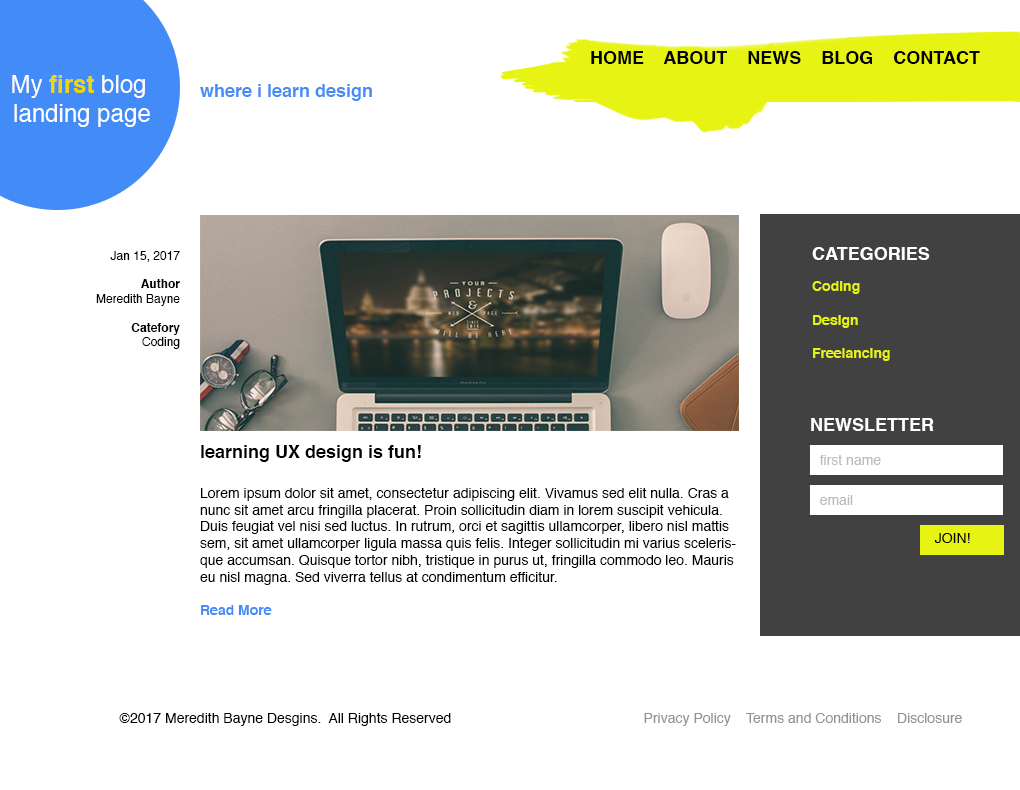
<style>
.page{position:relative;width:1020px;height:790px;background:#ffffff}
.page>*{position:absolute;margin:0}
.t1{font:18px "Helvetica-Bold";color:#000000}
.t2{font:24px "Helvetica";color:#ffffff}
.t3{font:24px "Helvetica-Bold";color:#f0d700}
.t4{font:18px "Helvetica-Bold";color:#438bf7}
.t5{font:12px "Helvetica";color:#000000}
.t6{font:12px "Helvetica-Bold";color:#000000}
.t7{font:14px "Helvetica-Bold";color:#e7f413}
.t8{font:18px "Helvetica-Bold";color:#ffffff}
.t9{font:14px "Helvetica";color:#c0baba}
.t10{font:14px "Helvetica";color:#000000}
.t11{font:14px "Helvetica-Bold";color:#438bf7}
.t12{font:14px "Helvetica";color:#020202}
.t13{font:14px "Helvetica";color:#959292}
</style>
<div class="page">
<p class="t1" style="left:591px;top:51px;width:389px;height:13px">HOME    ABOUT    NEWS    BLOG    CONTACT</p>
<p class="t2" style="left:12px;top:75px;width:138px;height:52px;text-align:center">My <span class="t3">first</span> blog <br>landing page</p>
<p class="t4" style="left:200px;top:84px;width:172px;height:17px">where i learn design</p>
<p class="t5" style="left:96px;top:251px;width:84px;height:98px;text-align:right">Jan 15, 2017<br><br><span class="t6">Author<br></span>Meredith Bayne<br><br><span class="t6">Catefory<br></span>Coding</p>
<p class="t7" style="left:812px;top:247px;width:118px;height:114px"><span class="t8">CATEGORIES<br><br></span>Coding<br><br>Design<br><br>Freelancing</p>
<p class="t8" style="left:811px;top:418px;width:123px;height:13px">NEWSLETTER</p>
<p class="t1" style="left:201px;top:445px;width:220px;height:17px">learning UX design is fun!</p>
<p class="t9" style="left:819px;top:455px;width:62px;height:10px">first name</p>
<p class="t10" style="left:200px;top:488px;width:536px;height:127px">Lorem ipsum dolor sit amet, consectetur adipiscing elit. Vivamus sed elit nulla. Cras a nunc sit amet arcu fringilla placerat. Proin sollicitudin diam in lorem suscipit vehicula. Duis feugiat vel nisi sed luctus. In rutrum, orci et sagittis ullamcorper, libero nisl mattis sem, sit amet ullamcorper ligula massa quis felis. Integer sollicitudin mi varius scelerisque accumsan. Quisque tortor nibh, tristique in purus ut, fringilla commodo leo. Mauris eu nisl magna. Sed viverra tellus at condimentum efficitur.<br><br><span class="t11">Read More</span></p>
<p class="t9" style="left:820px;top:495px;width:33px;height:10px">email</p>
<p class="t12" style="left:934px;top:533px;width:36px;height:10px">JOIN!</p>
<p class="t10" style="left:119px;top:713px;width:332px;height:13px">©2017 Meredith Bayne Desgins.  All Rights Reserved</p>
<p class="t13" style="left:644px;top:713px;width:318px;height:13px">Privacy Policy    Terms and Conditions    Disclosure</p>
</div>
